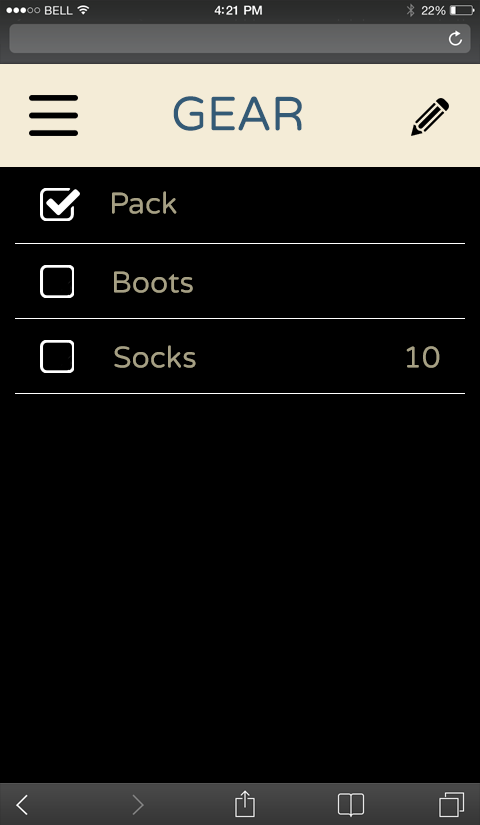
<style>
.page{position:relative;width:480px;height:825px;background:#000000}
.page>*{position:absolute;margin:0}
.t1{font:48px "VarelaRound-Regular";color:#335a76;text-transform:uppercase}
.t2{font:30px "VarelaRound-Regular";color:#a6a084}
</style>
<div class="page">
<p class="t1" style="left:173px;top:96px;width:129px;height:35px">GEAR</p>
<p class="t2" style="left:112px;top:191px;width:65px;height:23px">Pack</p>
<p class="t2" style="left:114px;top:271px;width:79px;height:22px">Boots</p>
<p class="t2" style="left:114px;top:345px;width:82px;height:23px">Socks</p>
<p class="t2" style="left:406px;top:346px;width:34px;height:22px">10</p>
</div>
